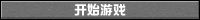
<style>
.page{position:relative;width:200px;height:20px;background:#6f6f6f}
.page>*{position:absolute;margin:0}
.t1{font:13px "toolboxZongYiGB-Bold";color:#fefefe}
</style>
<div class="page">
<p class="t1" style="left:74px;top:3px;width:52px;height:13px">开始游戏</p>
</div>
